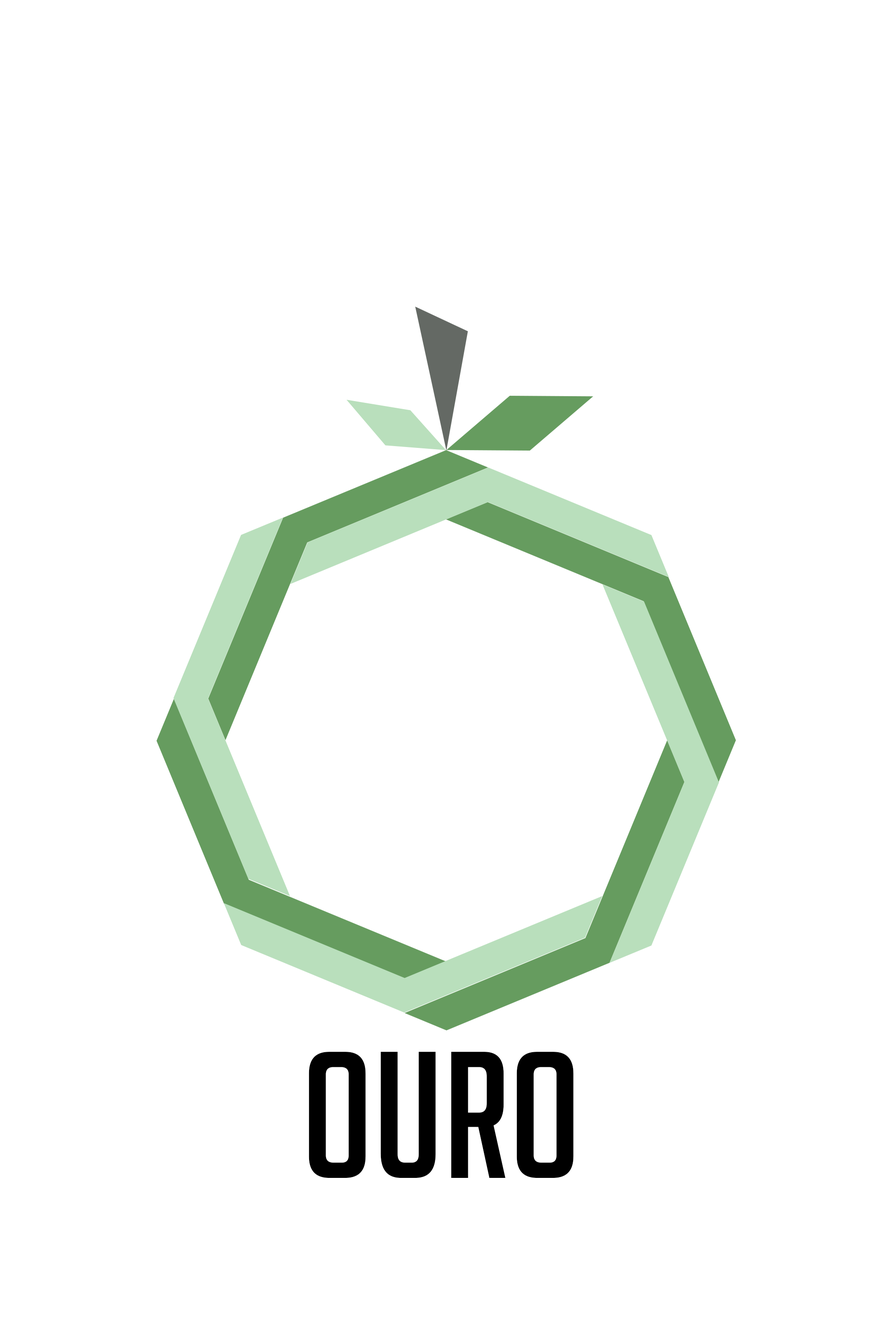
<style>
.page{position:relative;width:892px;height:1337px;background:#ffffff}
.page>*{position:absolute;margin:0}
.t1{font:251px "BigNoodleTitling";color:#000000;font-variant:small-caps}
</style>
<div class="page">
<p class="t1" style="left:308px;top:1052px;width:265px;height:126px">ouro</p>
</div>
